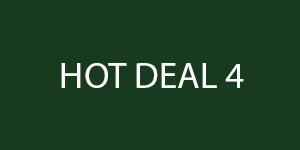
<style>
.page{position:relative;width:300px;height:150px;background:#183b20}
.page>*{position:absolute;margin:0}
.t1{font:37px "MyriadPro-Regular";color:#ffffff}
</style>
<div class="page">
<p class="t1" style="left:61px;top:63px;width:183px;height:25px">HOT DEAL 4</p>
</div>
